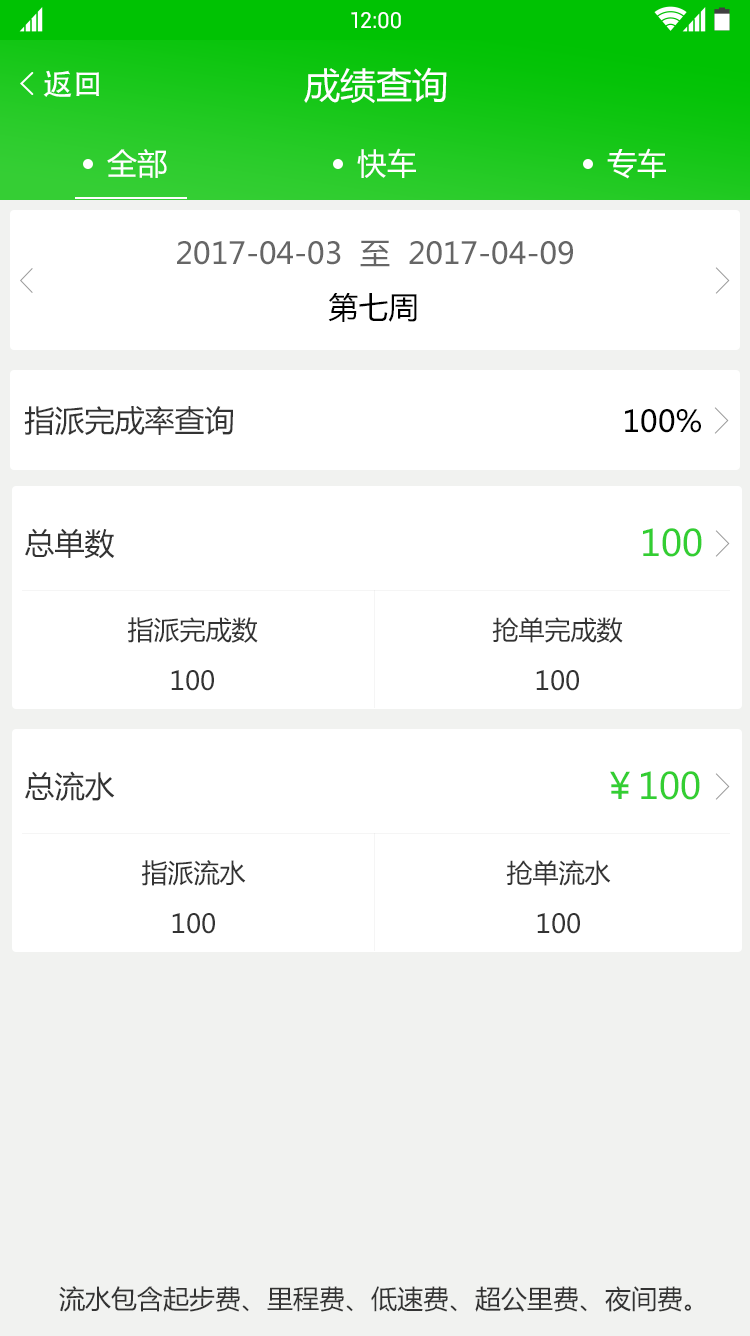
<style>
.page{position:relative;width:750px;height:1336px;background:#ffffff}
.page>*{position:absolute;margin:0}
.t1{font:22px "Roboto-Regular";color:#ffffff}
.t2{font:30px "AdobeHeitiStd-Regular";color:#ffffff}
.t3{font:36px "MicrosoftYaHei";color:#ffffff}
.t4{font:30px "MicrosoftYaHei";color:#ffffff}
.t5{font:30px "MicrosoftYaHei";color:#666666}
.t6{font:30px "MicrosoftYaHei";color:#000000}
.t7{font:30px "MicrosoftYaHei";color:#333333}
.t8{font:36px "MicrosoftYaHei";color:#33ce32}
.t9{font:26px "MicrosoftYaHei";color:#333333}
</style>
<div class="page">
<p class="t1" style="left:351px;top:12px;width:50px;height:17px">12:00</p>
<p class="t2" style="left:43px;top:70px;width:56px;height:27px">返回</p>
<p class="t3" style="left:304px;top:67px;width:143px;height:36px">成绩查询</p>
<p class="t4" style="left:107px;top:149px;width:60px;height:29px">全部</p>
<p class="t4" style="left:357px;top:148px;width:59px;height:30px">快车</p>
<p class="t4" style="left:607px;top:148px;width:59px;height:31px">专车</p>
<p class="t5" style="left:177px;top:240px;width:396px;height:27px">2017-04-03  至  2017-04-09</p>
<p class="t6" style="left:328px;top:293px;width:89px;height:29px">第七周</p>
<p class="t7" style="left:24px;top:406px;width:209px;height:30px">指派完成率查询</p>
<p class="t6" style="left:625px;top:409px;width:76px;height:24px">100%</p>
<p class="t7" style="left:25px;top:528px;width:90px;height:31px">总单数</p>
<p class="t8" style="left:643px;top:528px;width:59px;height:29px">100</p>
<p class="t9" style="left:128px;top:617px;width:130px;height:26px">指派完成数</p>
<p class="t9" style="left:492px;top:617px;width:131px;height:26px">抢单完成数</p>
<p class="t9" style="left:171px;top:670px;width:43px;height:21px">100</p>
<p class="t9" style="left:536px;top:670px;width:43px;height:21px">100</p>
<p class="t7" style="left:25px;top:771px;width:90px;height:30px">总流水</p>
<p class="t8" style="left:610px;top:771px;width:90px;height:29px">￥100</p>
<p class="t9" style="left:142px;top:860px;width:104px;height:26px">指派流水</p>
<p class="t9" style="left:506px;top:860px;width:105px;height:26px">抢单流水</p>
<p class="t9" style="left:172px;top:913px;width:43px;height:21px">100</p>
<p class="t9" style="left:537px;top:913px;width:43px;height:21px">100</p>
<p class="t9" style="left:59px;top:1286px;width:632px;height:26px">流水包含起步费、里程费、低速费、超公里费、夜间费。</p>
</div>
